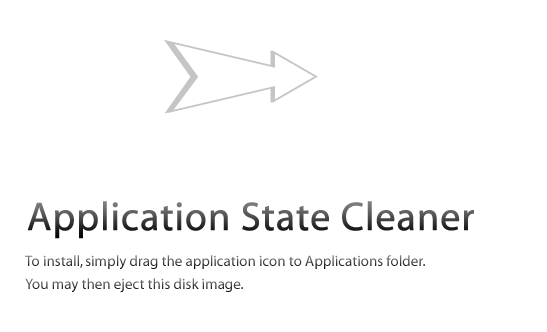
<style>
.page{position:relative;width:547px;height:332px;background:#ffffff}
.page>*{position:absolute;margin:0}
.t1{font:40px "Myriad-Roman";font-weight:bold}
.t2{font:15px "Myriad-Roman"}
</style>
<div class="page">
<p class="t1" style="left:27px;top:201px;width:447px;height:38px">Application State Cleaner</p>
<p class="t2" style="left:25px;top:255px;width:400px;height:15px">To install, simply drag the application icon to Applications folder.</p>
<p class="t2" style="left:25px;top:278px;width:218px;height:15px">You may then eject this disk image.</p>
</div>
